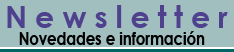
<style>
.page{position:relative;width:234px;height:52px;background:#a1bfbf}
.page>*{position:absolute;margin:0}
.t1{font:30.5px "CenturyGothic-Bold";letter-spacing:0.25em;color:#50418f}
.t2{font:18px "CenturyGothic-Bold";color:#000000;scale:0.82 1}
</style>
<div class="page">
<p class="t1" style="left:7px;top:5px;width:221px;height:23px">Newsletter</p>
<p class="t2" style="left:19px;top:31px;width:186px;height:14px">Novedades e información</p>
</div>
